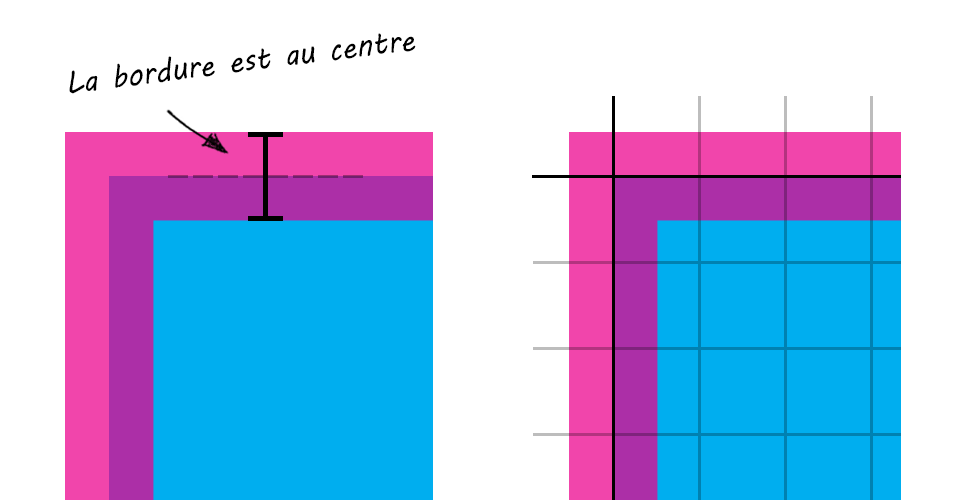
<style>
.page{position:relative;width:967px;height:500px;background:#ffffff}
.page>*{position:absolute;margin:0}
.t1{font:32px "MVBoli";color:#000000;scale:0.92 1}
</style>
<div class="page">
<p class="t1" style="left:69px;top:33px;width:347px;height:61px;rotate:-7deg">La bordure est au centre</p>
</div>
